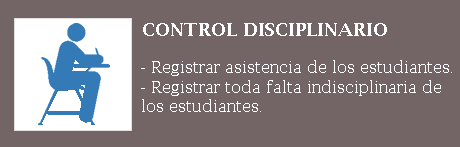
<style>
.page{position:relative;width:460px;height:147px;background:#736565}
.page>*{position:absolute;margin:0}
.t1{font:18px "LucidaBright-Demi";color:#fefefe}
.t2{font:16px "LucidaBright";color:#fefefe}
</style>
<div class="page">
<p class="t1" style="left:143px;top:23px;width:244px;height:13px">CONTROL DISCIPLINARIO</p>
<p class="t2" style="left:141px;top:60px;width:311px;height:52px">- Registrar asistencia de los estudiantes.<br>- Registrar toda falta indisciplinaria de los estudiantes.</p>
</div>
